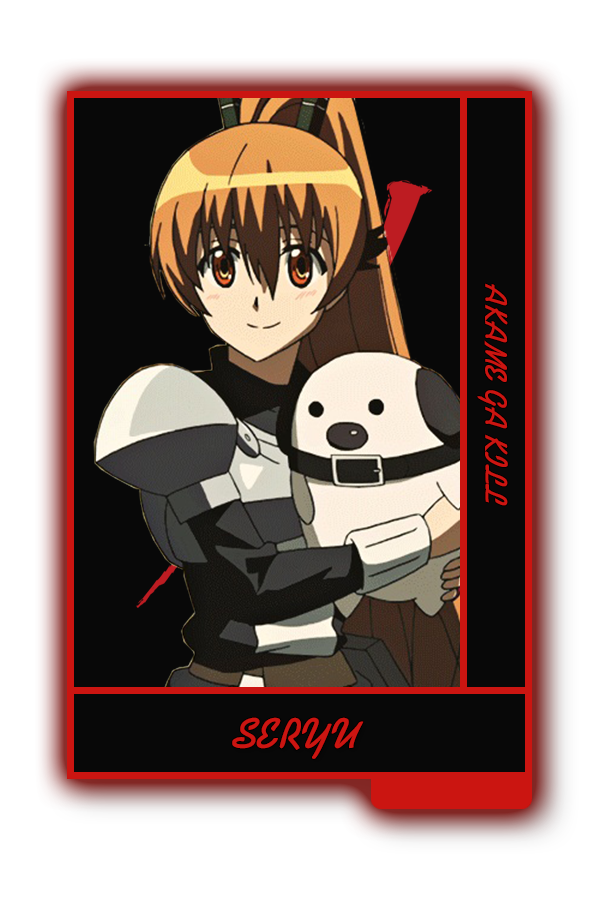
<style>
.page{position:relative;width:600px;height:900px;background:#080808}
.page>*{position:absolute;margin:0}
.t1{font:31.2px "Alako-Bold";color:#cb1511}
.t2{font:43.2px "Alako-Bold";color:#cb1511}
</style>
<div class="page">
<p class="t1" style="left:477px;top:283px;width:31px;height:223px;rotate:90deg">AKAME GA KILL</p>
<p class="t2" style="left:232px;top:717px;width:132px;height:42px">SERYU</p>
</div>
